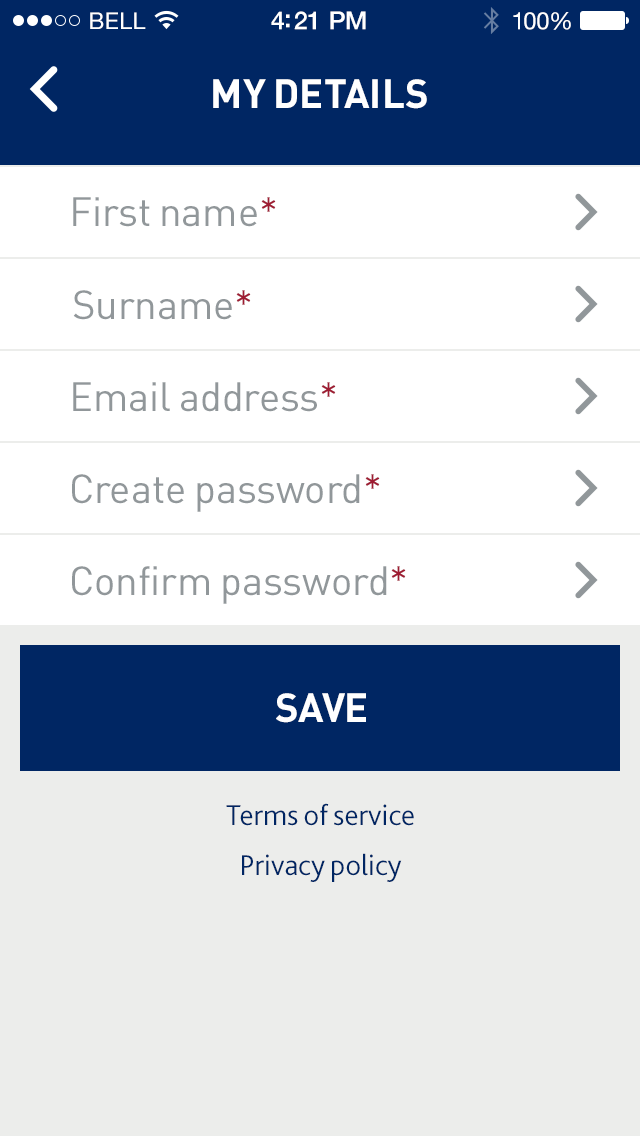
<style>
.page{position:relative;width:640px;height:1136px;background:#ffffff}
.page>*{position:absolute;margin:0}
.t1{font:23px "HelveticaNeue";letter-spacing:0.02em;color:#ffffff}
.t2{font:25px "HelveticaNeue-Medium";letter-spacing:-0.02em;color:#ffffff}
.t3{font:24px "HelveticaNeue";letter-spacing:-0.02em;color:#ffffff}
.t4{font:40px "DIN-Bold";color:#ffffff;text-transform:uppercase}
.t5{font:40px "DIN-Regular";color:#91979a}
.t6{font:40px "DIN-Regular";color:#9e1b32}
.t7{font:40px "DIN-Bold";letter-spacing:-0.015em;color:#ffffff;text-transform:uppercase}
.t8{font:30px/50px "Bliss2-Light";color:#002663}
</style>
<div class="page">
<p class="t1" style="left:90px;top:12px;width:56px;height:17px">BELL</p>
<p class="t2" style="left:271px;top:11px;width:95px;height:19px">4:21 PM</p>
<p class="t3" style="left:513px;top:12px;width:58px;height:18px">100%</p>
<p class="t4" style="left:213px;top:79px;width:214px;height:30px">my details</p>
<p class="t5" style="left:73px;top:197px;width:203px;height:30px">First name<span class="t6">*</span></p>
<p class="t5" style="left:73px;top:290px;width:178px;height:30px">Surname<span class="t6">*</span></p>
<p class="t5" style="left:73px;top:382px;width:263px;height:30px">Email address<span class="t6">*</span></p>
<p class="t5" style="left:72px;top:474px;width:308px;height:38px">Create password<span class="t6">*</span></p>
<p class="t5" style="left:72px;top:566px;width:334px;height:38px">Confirm password<span class="t6">*</span></p>
<p class="t7" style="left:276px;top:693px;width:90px;height:30px">save</p>
<p class="t8" style="left:226px;top:803px;width:188px;height:79px;text-align:center">Terms of service<br>Privacy policy</p>
</div>
